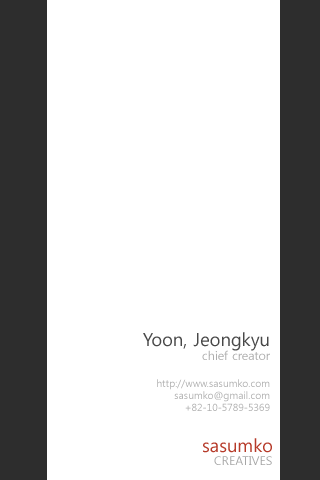
<style>
.page{position:relative;width:320px;height:480px;background:#ffffff}
.page>*{position:absolute;margin:0}
.t1{font:10px "MalgunGothicRegular";color:#aeaeae}
.t2{font:18px "MalgunGothicRegular";color:#484848}
.t3{font:12px "MalgunGothicRegular";color:#aeaeae}
.t4{font:18px "MalgunGothicRegular";color:#b63a29}
.t5{font:12px "MalgunGothicRegular";color:#a5a5a5}
</style>
<div class="page">
<p class="t1" style="left:143px;top:332px;width:127px;height:79px;text-align:right"><span class="t2">Yoon, Jeongkyu<br></span><span class="t3">chief creator<br><br></span>http://www.sasumko.com<br>sasumko@gmail.com<br>+82-10-5789-5369</p>
<p class="t4" style="left:203px;top:438px;width:69px;height:15px">sasumko</p>
<p class="t5" style="left:214px;top:456px;width:58px;height:9px">CREATIVES</p>
</div>
